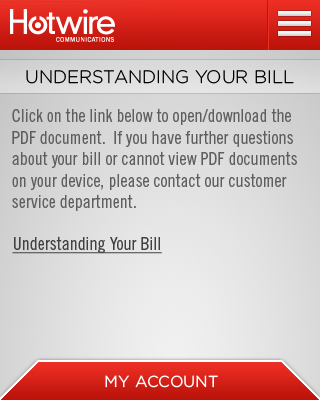
<style>
.page{position:relative;width:320px;height:400px}
.page>*{position:absolute;margin:0}
.t1{font:18px "Gotham-Light";color:#000000;text-transform:uppercase}
.t2{font:18px "TradeGothicLTStd-Cn18";color:#5e5e5e}
.t3{font:18px "TradeGothicLTStd-Cn18";color:#414141;text-decoration:underline}
.t4{font:16px "Gotham-Book";color:#ffffff;text-transform:uppercase}
</style>
<div class="page">
<p class="t1" style="left:26px;top:70px;width:268px;height:14px">Understanding Your Bill</p>
<p class="t2" style="left:12px;top:108px;width:285px;height:103px">Click on the link below to open/download the PDF document.  If you have further questions about your bill or cannot view PDF documents on your device, please contact our customer service department.</p>
<p class="t3" style="left:12px;top:236px;width:150px;height:18px">Understanding Your Bill</p>
<p class="t4" style="left:105px;top:375px;width:113px;height:13px">My Account</p>
</div>
